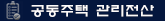
<style>
.page{position:relative;width:165px;height:21px;background:#04163d}
.page>*{position:absolute;margin:0}
.t1{font:14px "ExpoM-HM";letter-spacing:0.05em;color:#fcfafa}
</style>
<div class="page">
<p class="t1" style="left:31px;top:5px;width:123px;height:12px">공동주택 관리전산</p>
</div>
